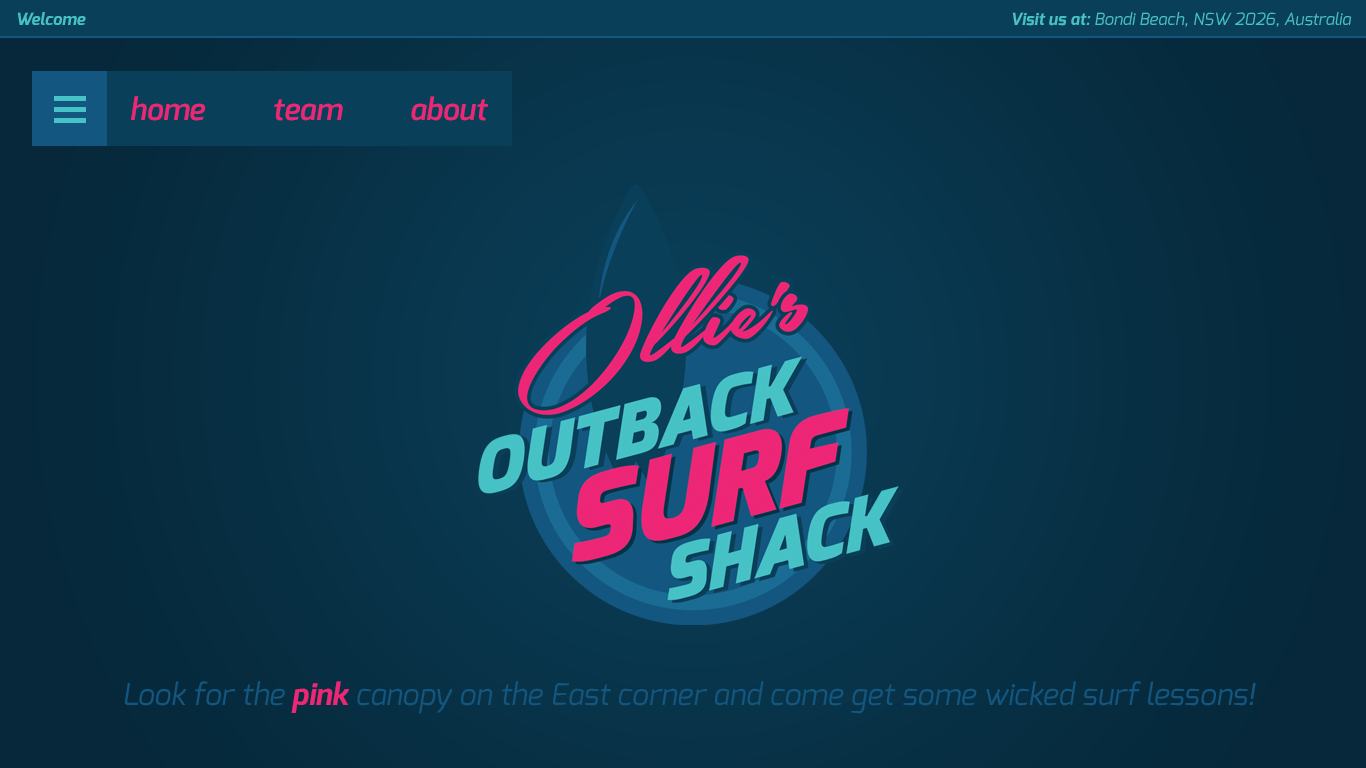
<style>
.page{position:relative;width:1366px;height:768px}
.page>*{position:absolute;margin:0}
.t1{font:16.7px "Exo-BoldItalic";color:#46c1c5}
.t2{font:16.7px "Exo-Italic";color:#46c1c5}
.t3{font:30px "Exo-DemiBoldItalic";color:#ed2676}
.t4{font:30px "Exo-Italic";color:#135780}
.t5{font:30px "Exo-BoldItalic";color:#ed2676}
</style>
<div class="page">
<p class="t1" style="left:17px;top:12px;width:69px;height:13px">Welcome</p>
<p class="t2" style="left:1012px;top:12px;width:340px;height:15px"><span class="t1">Visit us at:</span> Bondi Beach, NSW 2026, Australia</p>
<p class="t3" style="left:131px;top:96px;width:357px;height:25px">home         team         about</p>
<p class="t4" style="left:125px;top:681px;width:1131px;height:33px">Look for the <span class="t5">pink </span>canopy on the East corner and come get some wicked surf lessons!</p>
</div>
